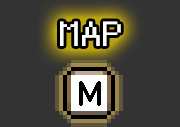
<style>
.page{position:relative;width:180px;height:127px;background:#333333}
.page>*{position:absolute;margin:0}
.t1{font:49px "Silver";color:#ffffff;scale:1.3 1}
</style>
<div class="page">
<p class="t1" style="left:60px;top:21px;width:61px;height:25px">MAP</p>
</div>
